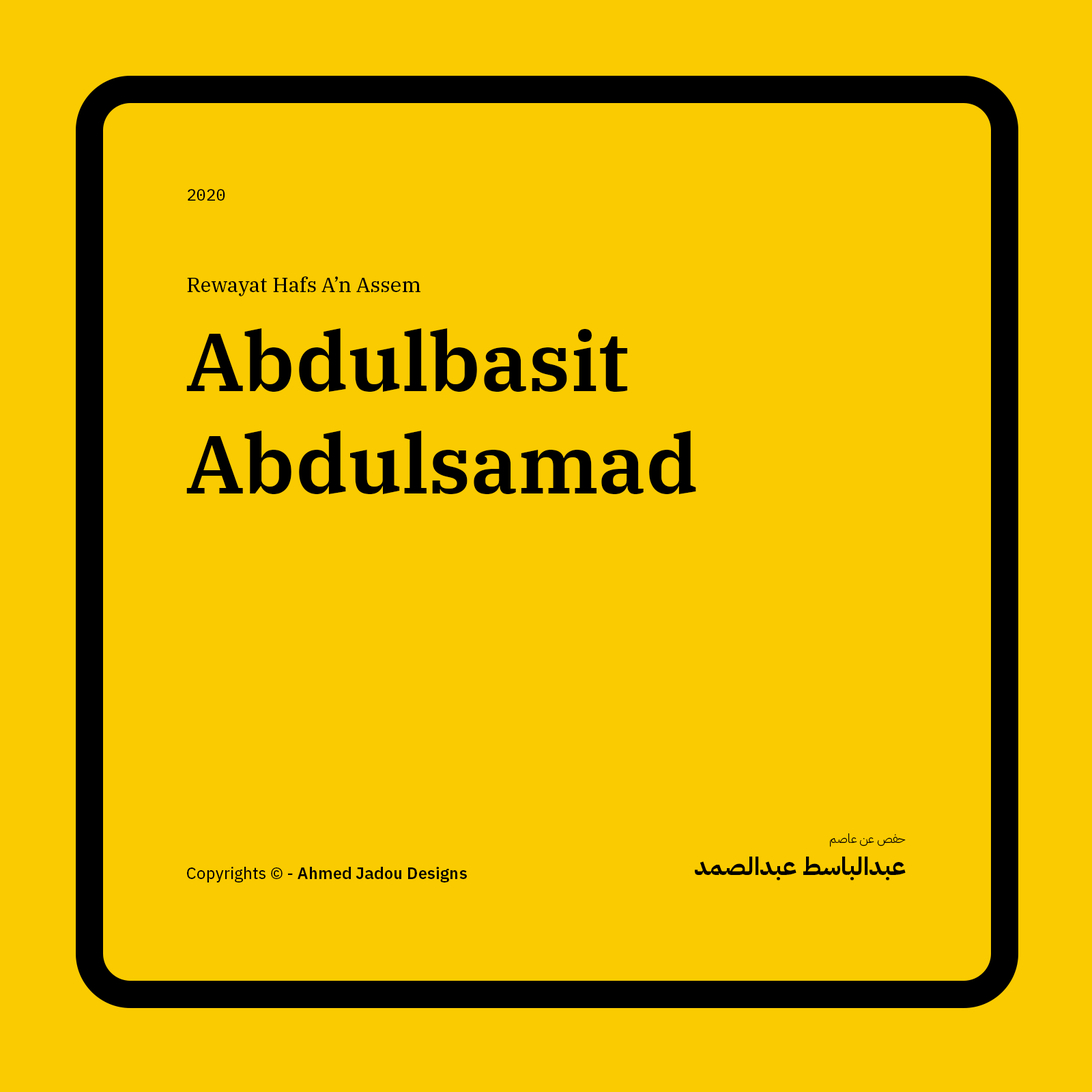
<style>
.page{position:relative;width:1092px;height:1092px;background:#facb00}
.page>*{position:absolute;margin:0}
.t1{font:16.4px "IBMPlexMono-Text";color:#000000}
.t2{font:20.5px "IBMPlexSerif-Text";color:#000000}
.t3{font:81.9px/102.7px "IBMPlexSerif-SemiBold";color:#000000}
.t4{font:12.3px "IBMPlexArabic-Light";color:#000000}
.t5{font:24.6px "IBMPlexArabic-Bold";color:#000000}
.t6{font:16.4px "IBMPlexSans-SemiBold";color:#000000}
.t7{font:16.4px "IBMPlexSans-Text";color:#000000}
</style>
<div class="page">
<p class="t1" style="left:188px;top:189px;width:37px;height:12px">2020</p>
<p class="t2" style="left:187px;top:276px;width:233px;height:20px">Rewayat Hafs A’n Assem</p>
<p class="t3" style="left:186px;top:328px;width:510px;height:166px">Abdulbasit Abdulsamad</p>
<p class="t4" style="left:830px;top:833px;width:76px;height:14px">حفص عن عاصم</p>
<p class="t5" style="left:695px;top:857px;width:211px;height:23px">عبدالباسط عبدالصمد</p>
<p class="t6" style="left:187px;top:867px;width:280px;height:15px"><span class="t7">Copyrights © - </span>Ahmed Jadou Designs</p>
</div>
